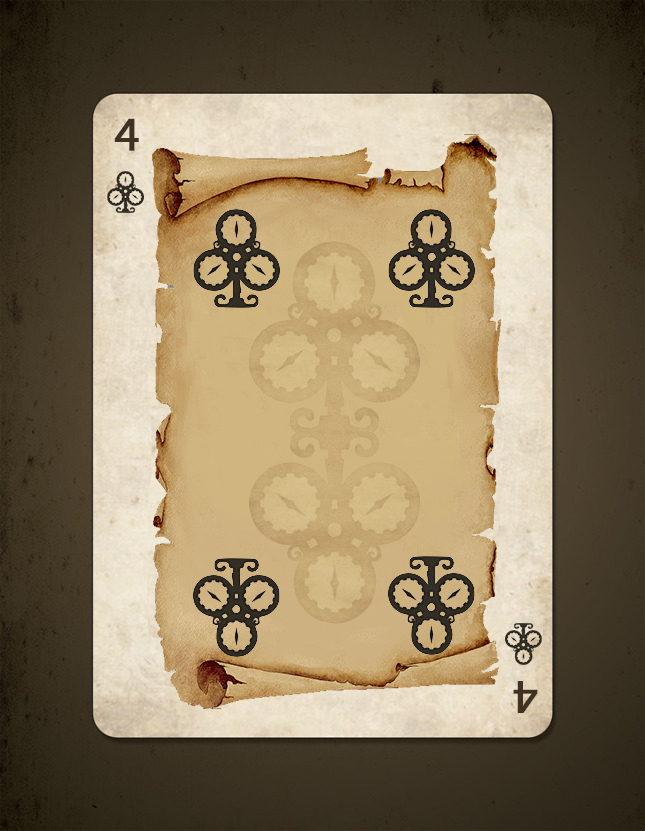
<style>
.page{position:relative;width:645px;height:831px}
.page>*{position:absolute;margin:0}
.t1{font:48px "MyriadPro-Regular";color:#3f3222;font-weight:bold}
</style>
<div class="page">
<p class="t1" style="left:114px;top:118px;width:25px;height:33px">4</p>
<p class="t1" style="left:513px;top:681px;width:25px;height:32px;rotate:180deg">4</p>
</div>
